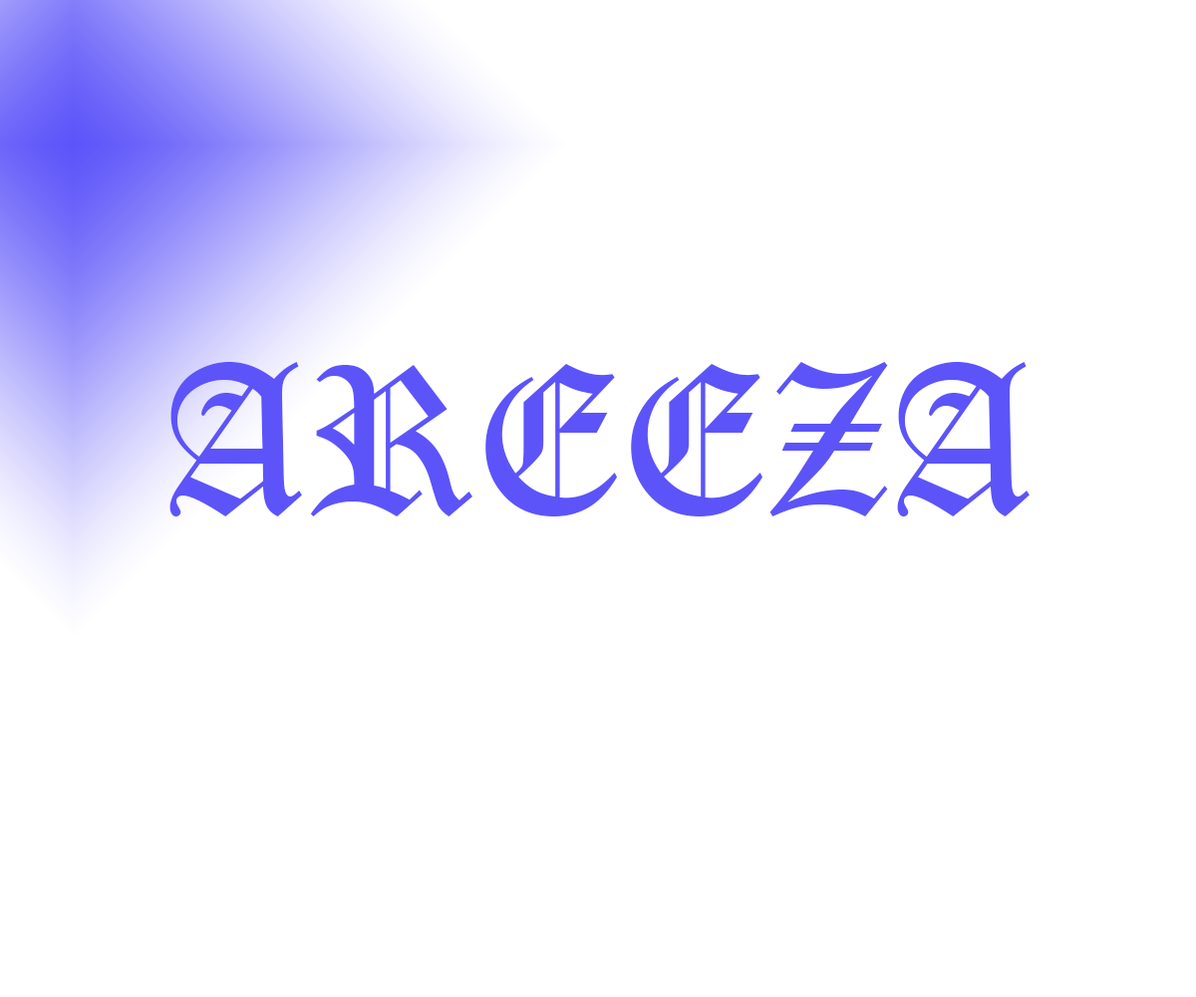
<style>
.page{position:relative;width:1196px;height:997px;background:#ffffff}
.page>*{position:absolute;margin:0}
.t1{font:209px "OldEnglishTextMT";color:#5c54f9;scale:0.95 1}
</style>
<div class="page">
<p class="t1" style="left:169px;top:362px;width:861px;height:154px">AREEZA</p>
</div>
